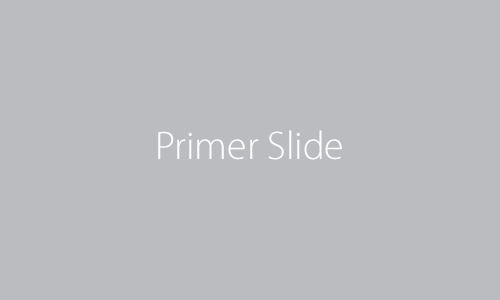
<style>
.page{position:relative;width:500px;height:300px;background:#bbbcbf}
.page>*{position:absolute;margin:0}
.t1{font:40px "MyriadPro-Light";color:#ffffff}
</style>
<div class="page">
<p class="t1" style="left:158px;top:130px;width:184px;height:30px">Primer Slide</p>
</div>
